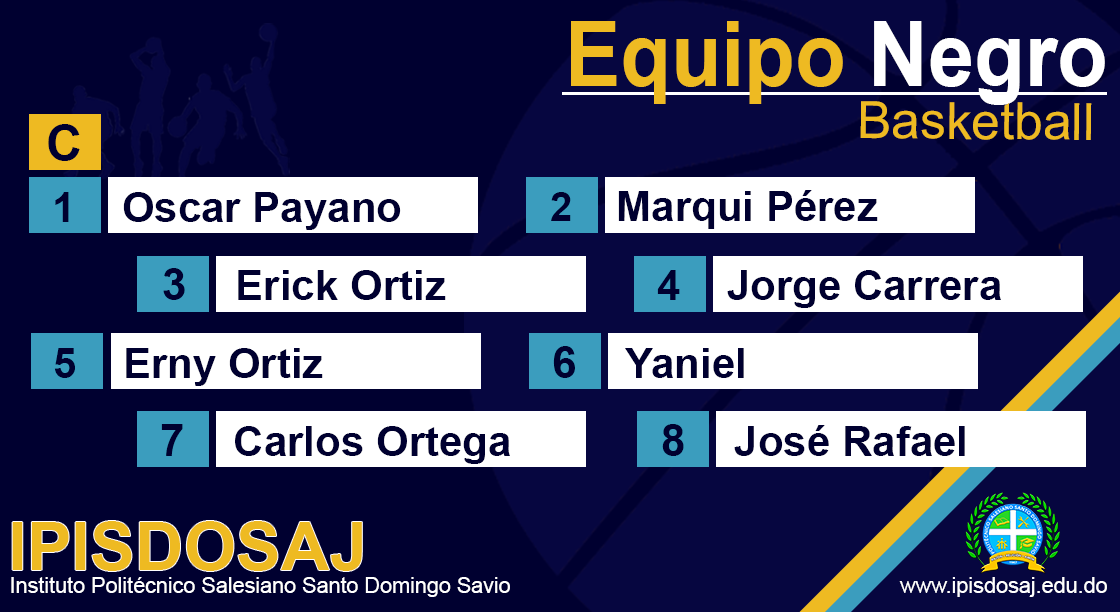
<style>
.page{position:relative;width:1120px;height:612px;background:#000030}
.page>*{position:absolute;margin:0}
.t1{font:90.9px "Arial-BoldMT";color:#eeba22;scale:0.91 1}
.t2{font:90.9px "Arial-BoldMT";color:#ffffff;scale:0.91 1}
.t3{font:51.4px "ArialMT";color:#eeba22}
.t4{font:50px "Arial-BoldMT";color:#000030}
.t5{font:42px "Arial-BoldMT";color:#000030}
.t6{font:40px "Arial-BoldMT";color:#000030}
.t7{font:44.3px "Arial-BoldMT";color:#000030}
.t8{font:67.3px "Arial-BoldMT";color:#eeba22}
.t9{font:21.6px "ArialMT";color:#ffffff}
</style>
<div class="page">
<p class="t1" style="left:571px;top:21px;width:534px;height:84px">Equipo <span class="t2">Negro</span></p>
<p class="t3" style="left:860px;top:101px;width:232px;height:39px">Basketball</p>
<p class="t4" style="left:48px;top:124px;width:32px;height:37px">C</p>
<p class="t5" style="left:55px;top:192px;width:346px;height:38px">1    Oscar Payano</p>
<p class="t5" style="left:551px;top:190px;width:327px;height:39px"><span class="t6">2    </span>Marqui Pérez</p>
<p class="t5" style="left:163px;top:268px;width:283px;height:32px"><span class="t7">3    </span>Erick Ortiz</p>
<p class="t5" style="left:657px;top:270px;width:344px;height:38px">4    Jorge Carrera</p>
<p class="t5" style="left:54px;top:348px;width:269px;height:38px">5    Erny Ortiz</p>
<p class="t5" style="left:553px;top:346px;width:191px;height:32px"><span class="t7">6    </span>Yaniel</p>
<p class="t5" style="left:161px;top:424px;width:349px;height:40px"><span class="t7">7    </span>Carlos Ortega</p>
<p class="t5" style="left:662px;top:424px;width:303px;height:32px"><span class="t7">8    </span>José Rafael</p>
<p class="t8" style="left:12px;top:521px;width:350px;height:50px">IPISDOSAJ</p>
<p class="t9" style="left:11px;top:577px;width:1096px;height:20px">Instituto Politécnico Salesiano Santo Domingo Savio                                                                 www.ipisdosaj.edu.do</p>
</div>
